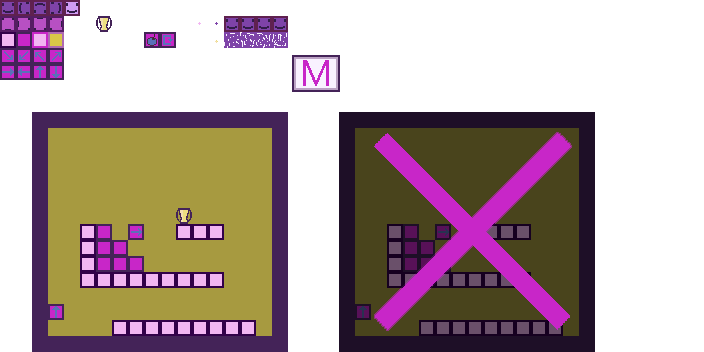
<style>
.page{position:relative;width:704px;height:352px;background:#ffffff}
.page>*{position:absolute;margin:0}
.t1{font:36px "SegoeUI";color:#c826c8}
</style>
<div class="page">
<p class="t1" style="left:303px;top:60px;width:26px;height:26px">M</p>
</div>
